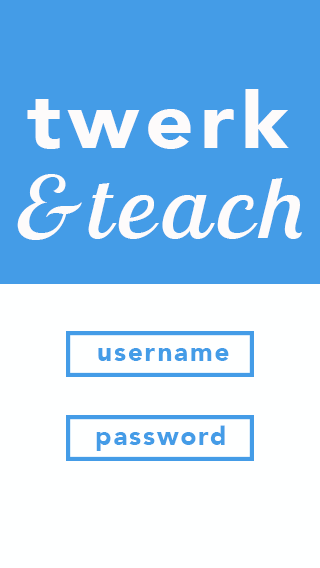
<style>
.page{position:relative;width:320px;height:568px;background:#feffff}
.page>*{position:absolute;margin:0}
.t1{font:78.3px "Avenir-Black";letter-spacing:0.075em;color:#fdfbfb;scale:1.09 1}
.t2{font:85.2px "LobsterTwo-Italic";letter-spacing:0.075em;color:#fdfbfb;scale:1.15 1}
.t3{font:25.8px "Avenir-Black";letter-spacing:0.075em;color:#449ce7}
</style>
<div class="page">
<p class="t1" style="left:27px;top:89px;width:262px;height:60px">twerk</p>
<p class="t2" style="left:17px;top:174px;width:285px;height:66px">&amp;teach</p>
<p class="t3" style="left:98px;top:348px;width:131px;height:13px">username</p>
<p class="t3" style="left:96px;top:425px;width:129px;height:26px">password</p>
</div>
